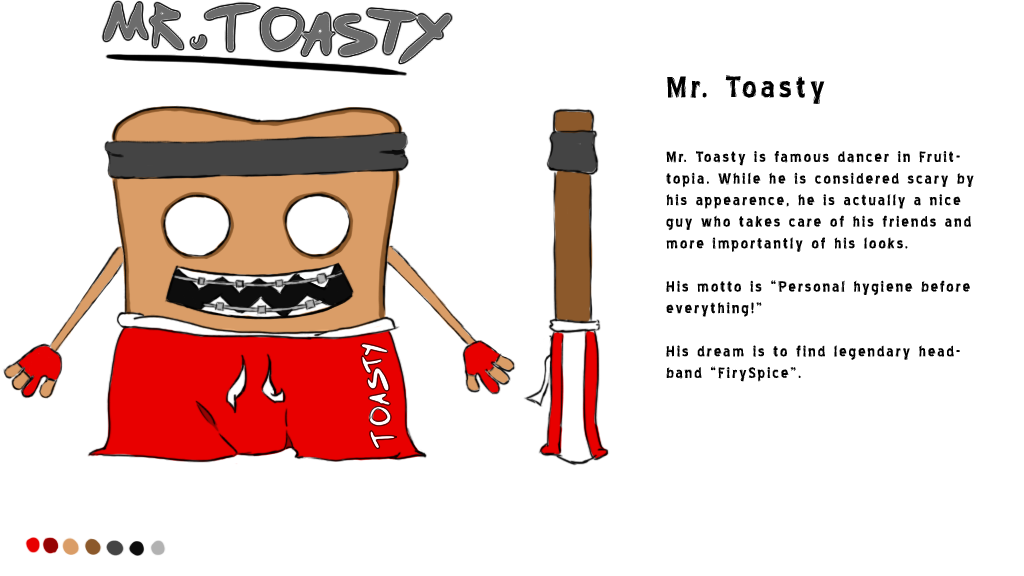
<style>
.page{position:relative;width:1024px;height:576px;background:#ffffff}
.page>*{position:absolute;margin:0}
.t1{font:18px "BlueHighwayLinocut";letter-spacing:0.1em;color:#000000}
.t2{font:36px "BlueHighwayLinocut";letter-spacing:0.1em;color:#000000}
</style>
<div class="page">
<p class="t1" style="left:666px;top:75px;width:308px;height:307px"><span class="t2">Mr. Toasty<br><br></span>Mr. Toasty is famous dancer in Fruittopia. While he is considered scary by his appearence, he is actually a nice guy who takes care of his friends and more importantly of his looks.<br><br>His motto is “Personal hygiene before everything!”<br><br>His dream is to find legendary headband “FirySpice”.</p>
</div>
